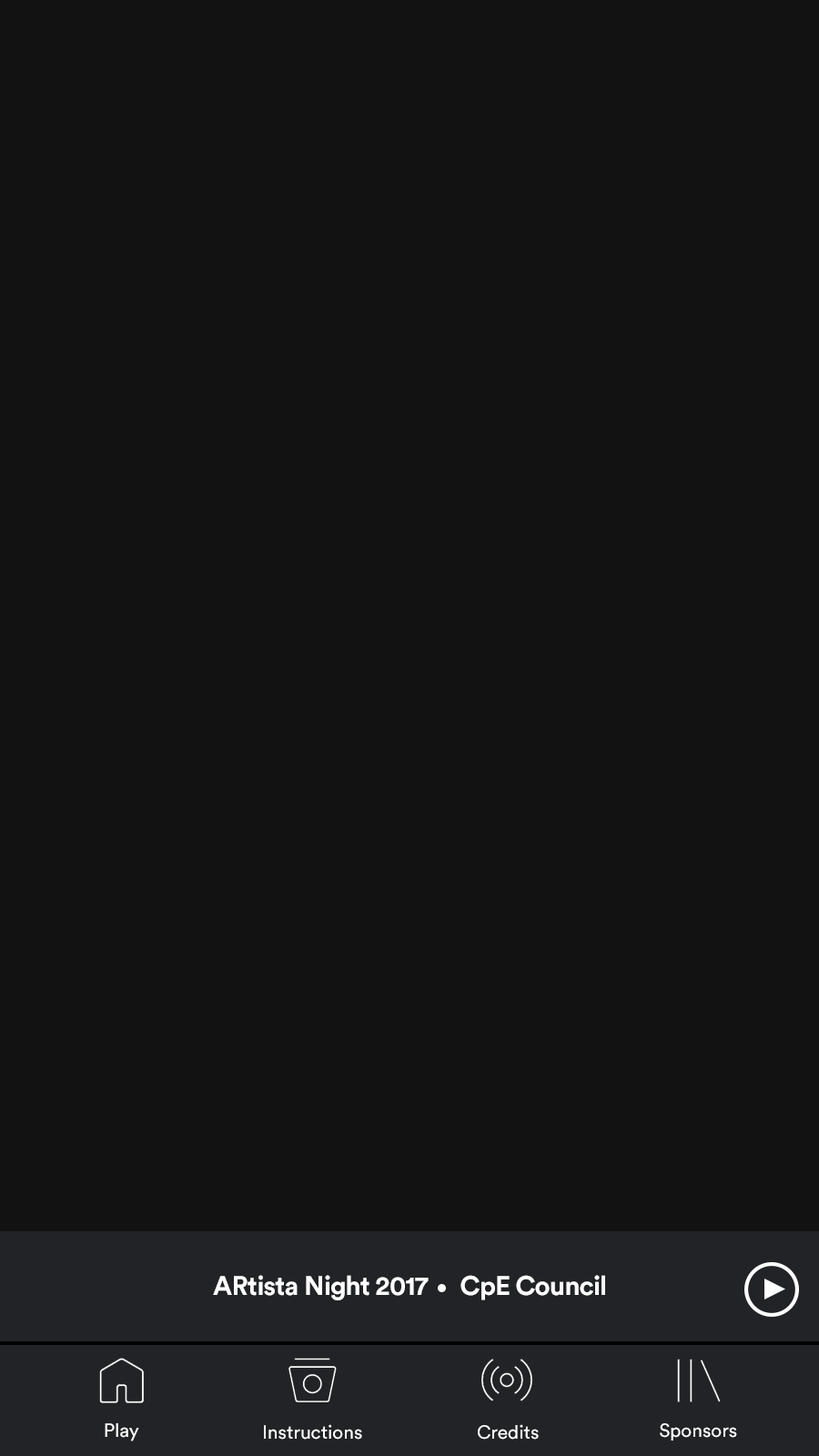
<style>
.page{position:relative;width:819px;height:1456px;background:#121212}
.page>*{position:absolute;margin:0}
.t1{font:26.5px "CircularStd-Bold";letter-spacing:-0.025em;color:#ffffff}
.t2{font:19px "CircularStd-Book";color:#ffffff}
</style>
<div class="page">
<p class="t1" style="left:213px;top:1275px;width:216px;height:25px">ARtista Night 2017</p>
<p class="t1" style="left:460px;top:1275px;width:145px;height:25px">CpE Council</p>
<p class="t2" style="left:105px;top:1423px;width:34px;height:18px">Play</p>
<p class="t2" style="left:264px;top:1424px;width:98px;height:16px">Instructions</p>
<p class="t2" style="left:478px;top:1424px;width:61px;height:16px">Credits</p>
<p class="t2" style="left:660px;top:1423px;width:77px;height:18px">Sponsors</p>
</div>
